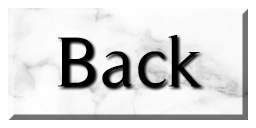
<style>
.page{position:relative;width:256px;height:128px}
.page>*{position:absolute;margin:0}
.t1{font:72px "Timeless-Normal";color:#000000}
</style>
<div class="page">
<p class="t1" style="left:58px;top:35px;width:144px;height:53px">Back</p>
</div>
